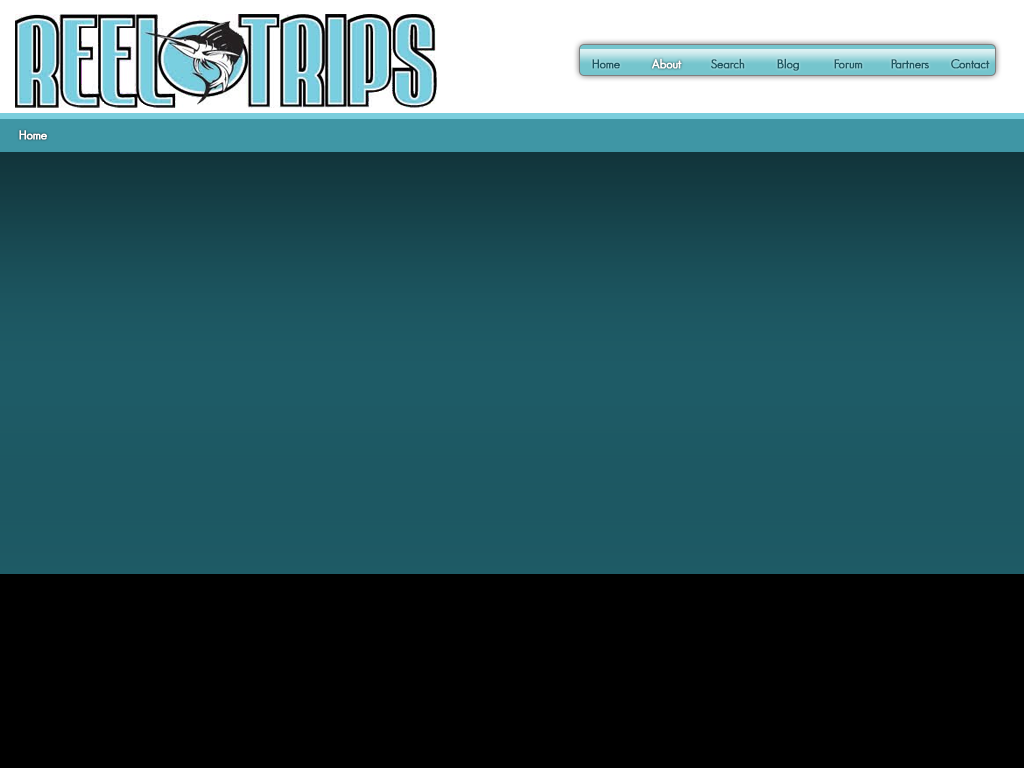
<style>
.page{position:relative;width:1024px;height:768px;background:#000000}
.page>*{position:absolute;margin:0}
.t1{font:12px "GeosansLight";color:#1d5964;font-weight:bold}
.t2{font:12px "GeosansLight";color:#ffffff;font-weight:bold}
.t3{font:12px "GeosansLight";color:#1e5964;font-weight:bold}
</style>
<div class="page">
<p class="t1" style="left:592px;top:59px;width:28px;height:10px">Home</p>
<p class="t2" style="left:652px;top:58px;width:30px;height:11px">About</p>
<p class="t3" style="left:711px;top:58px;width:34px;height:11px">Search</p>
<p class="t3" style="left:777px;top:58px;width:22px;height:13px">Blog</p>
<p class="t3" style="left:834px;top:59px;width:29px;height:10px">Forum</p>
<p class="t3" style="left:891px;top:59px;width:38px;height:10px">Partners</p>
<p class="t3" style="left:951px;top:59px;width:39px;height:10px">Contact</p>
<p class="t2" style="left:19px;top:130px;width:28px;height:10px">Home</p>
</div>
